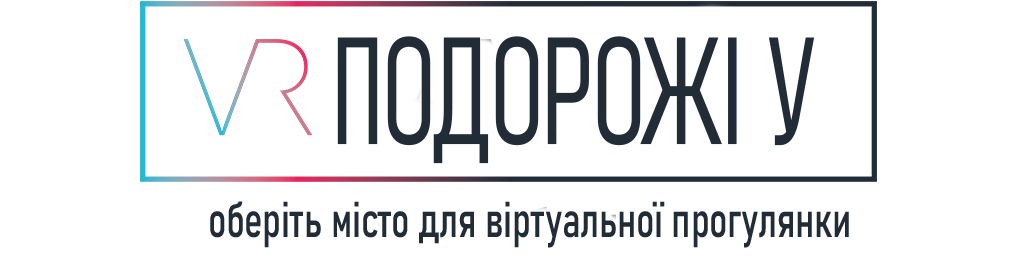
<style>
.page{position:relative;width:1024px;height:256px;background:#ffffff}
.page>*{position:absolute;margin:0}
.t1{font:150px "Bahnschrift-LightCondensed";letter-spacing:-0.01em;color:#212c37;font-weight:bold;scale:0.8 1}
.t2{font:50px "Bahnschrift-SemiCondensed";letter-spacing:-0.01em;color:#212c37;font-weight:bold;scale:0.8 1}
</style>
<div class="page">
<p class="t1" style="left:337px;top:36px;width:478px;height:128px">ПОДОРОЖІ У</p>
<p class="t2" style="left:210px;top:201px;width:639px;height:47px">оберіть місто для віртуальної прогулянки</p>
</div>
